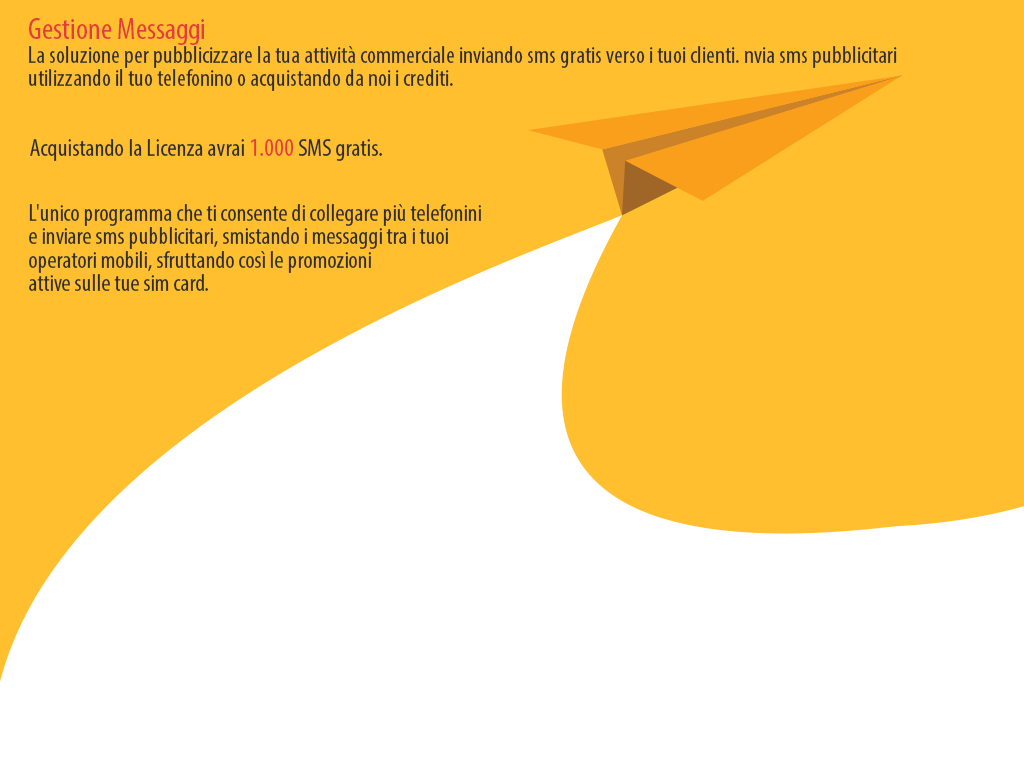
<style>
.page{position:relative;width:1024px;height:768px;background:#ffbf2e}
.page>*{position:absolute;margin:0}
.t1{font:24px/23.7px "MyriadPro-Cond";color:#2f2f2f}
.t2{font:31px/23.7px "MyriadPro-Cond";color:#e63c3d}
.t3{font:25px "MyriadPro-Cond";color:#2f2f2f}
.t4{font:20px "MyriadPro-Cond";color:#2f2f2f}
.t5{font:25px "MyriadPro-Cond";color:#e63c3d}
</style>
<div class="page">
<p class="t1" style="left:29px;top:18px;width:868px;height:73px"><span class="t2">Gestione Messaggi  <br></span>La soluzione per pubblicizzare la tua attività commerciale inviando sms gratis verso i tuoi clienti. nvia sms pubblicitari<br>utilizzando il tuo telefonino o acquistando da noi i crediti.</p>
<p class="t3" style="left:30px;top:139px;width:352px;height:22px"><span class="t4"><br></span>Acquistando la Licenza avrai <span class="t5">1.000</span> SMS gratis.</p>
<p class="t1" style="left:29px;top:204px;width:452px;height:87px">L'unico programma che ti consente di collegare più telefonini<br>e inviare sms pubblicitari, smistando i messaggi tra i tuoi<br>operatori mobili, sfruttando così le promozioni<br>attive sulle tue sim card.</p>
</div>
